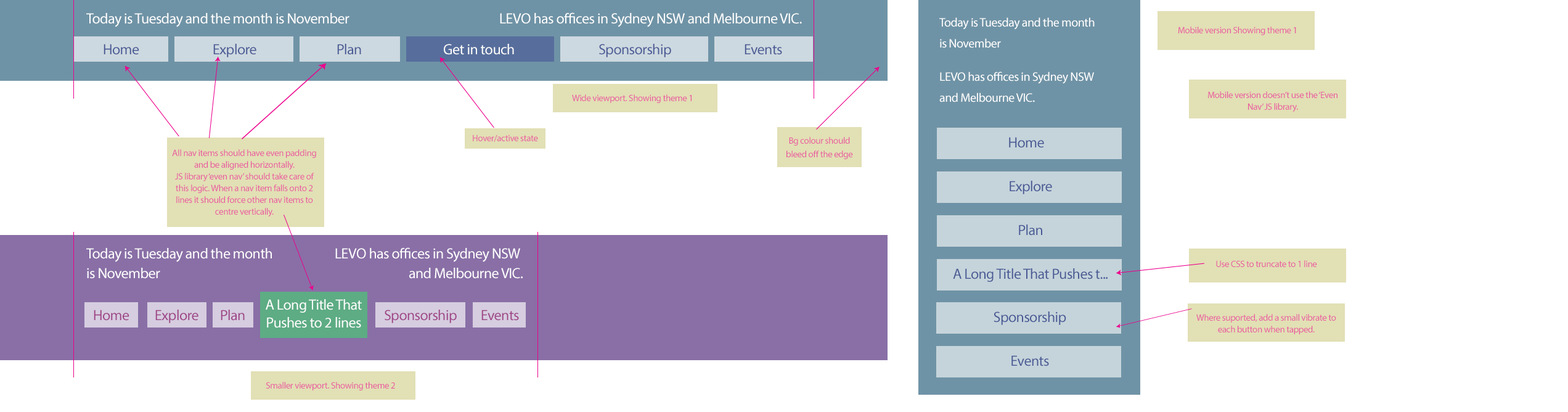
<style>
.page{position:relative;width:1568px;height:412px;background:#ffffff}
.page>*{position:absolute;margin:0}
.t1{font:14.8px "MyriadPro-Regular";letter-spacing:-0.025em;color:#ffffff}
.t2{font:12.3px/21px "MyriadPro-Regular";letter-spacing:-0.025em;color:#ffffff}
.t3{font:9.2px "MyriadPro-Regular";letter-spacing:-0.025em;color:#ea549e}
.t4{font:14.8px "MyriadPro-Regular";letter-spacing:-0.025em;color:#495994}
.t5{font:14.8px "MyriadPro-Regular";letter-spacing:-0.025em;color:#fefefe}
.t6{font:9.2px/11.7px "MyriadPro-Regular";letter-spacing:-0.025em;color:#ea549e}
.t7{font:9.2px/13.6px "MyriadPro-Regular";letter-spacing:-0.025em;color:#ea549e}
.t8{font:14.8px/19.7px "MyriadPro-Regular";letter-spacing:-0.025em;color:#ffffff}
.t9{font:14.8px/17.9px "MyriadPro-Regular";letter-spacing:-0.025em;color:#fefefe}
.t10{font:14.8px "MyriadPro-Regular";letter-spacing:-0.025em;color:#9e4486}
</style>
<div class="page">
<p class="t1" style="left:86px;top:13px;width:263px;height:14px">Today is Tuesday and the month is November</p>
<p class="t1" style="left:500px;top:12px;width:302px;height:15px">LEVO has offices in Sydney NSW and Melbourne VIC.</p>
<p class="t2" style="left:939px;top:17px;width:156px;height:85px">Today is Tuesday and the month <br>is November<br>LEVO has offices in Sydney NSW <br>and Melbourne VIC.</p>
<p class="t3" style="left:1178px;top:27px;width:118px;height:8px">Mobile version Showing theme 1</p>
<p class="t4" style="left:104px;top:44px;width:35px;height:11px">Home</p>
<p class="t4" style="left:213px;top:44px;width:43px;height:13px">Explore</p>
<p class="t4" style="left:337px;top:44px;width:24px;height:11px">Plan</p>
<p class="t5" style="left:444px;top:44px;width:70px;height:11px">Get in touch</p>
<p class="t4" style="left:599px;top:44px;width:72px;height:13px">Sponsorship</p>
<p class="t4" style="left:745px;top:44px;width:37px;height:11px">Events</p>
<p class="t3" style="left:572px;top:94px;width:120px;height:9px">Wide viewport. Showing theme 1</p>
<p class="t6" style="left:1208px;top:91px;width:129px;height:21px;text-align:center">Mobile version doesn’t use the ‘Even Nav’ JS library.</p>
<p class="t3" style="left:473px;top:134px;width:65px;height:8px">Hover/active state</p>
<p class="t7" style="left:786px;top:137px;width:67px;height:22px;text-align:center">Bg colour should bleed off the edge</p>
<p class="t4" style="left:1009px;top:137px;width:35px;height:11px">Home</p>
<p class="t6" style="left:172px;top:149px;width:144px;height:67px;text-align:center">All nav items should have even padding and be aligned horizontally.<br>JS library ‘even nav’ should take care of this logic. When a nav item falls onto 2 lines it should force other nav items to centre vertically.</p>
<p class="t4" style="left:1010px;top:181px;width:42px;height:13px">Explore</p>
<p class="t4" style="left:1019px;top:224px;width:23px;height:11px">Plan</p>
<p class="t8" style="left:86px;top:248px;width:186px;height:31px">Today is Tuesday and the month <br>is November</p>
<p class="t8" style="left:335px;top:247px;width:188px;height:32px;text-align:right">LEVO has offices in Sydney NSW <br>and Melbourne VIC.</p>
<p class="t4" style="left:953px;top:268px;width:155px;height:14px">A Long Title That Pushes t...</p>
<p class="t3" style="left:1216px;top:260px;width:101px;height:7px">Use CSS to truncate to 1 line</p>
<p class="t9" style="left:266px;top:299px;width:96px;height:29px;text-align:center">A Long Title That<br>Pushes to 2 lines</p>
<p class="t10" style="left:94px;top:309px;width:35px;height:12px">Home</p>
<p class="t10" style="left:155px;top:309px;width:43px;height:14px">Explore</p>
<p class="t10" style="left:221px;top:309px;width:24px;height:12px">Plan</p>
<p class="t10" style="left:385px;top:309px;width:72px;height:14px">Sponsorship</p>
<p class="t10" style="left:481px;top:309px;width:38px;height:12px">Events</p>
<p class="t4" style="left:994px;top:311px;width:72px;height:14px">Sponsorship</p>
<p class="t6" style="left:1196px;top:314px;width:140px;height:20px;text-align:center">Where suported, add a small vibrate to each button when tapped.</p>
<p class="t4" style="left:1011px;top:355px;width:38px;height:11px">Events</p>
<p class="t3" style="left:266px;top:382px;width:129px;height:8px">Smaller viewport. Showing theme 2</p>
</div>
